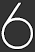
<style>
.page{position:relative;width:35px;height:52px;background:#333333}
.page>*{position:absolute;margin:0}
.t1{font:55px "Steiner";color:#ffffff}
</style>
<div class="page">
<p class="t1" style="left:1px;top:2px;width:32px;height:47px">6</p>
</div>
